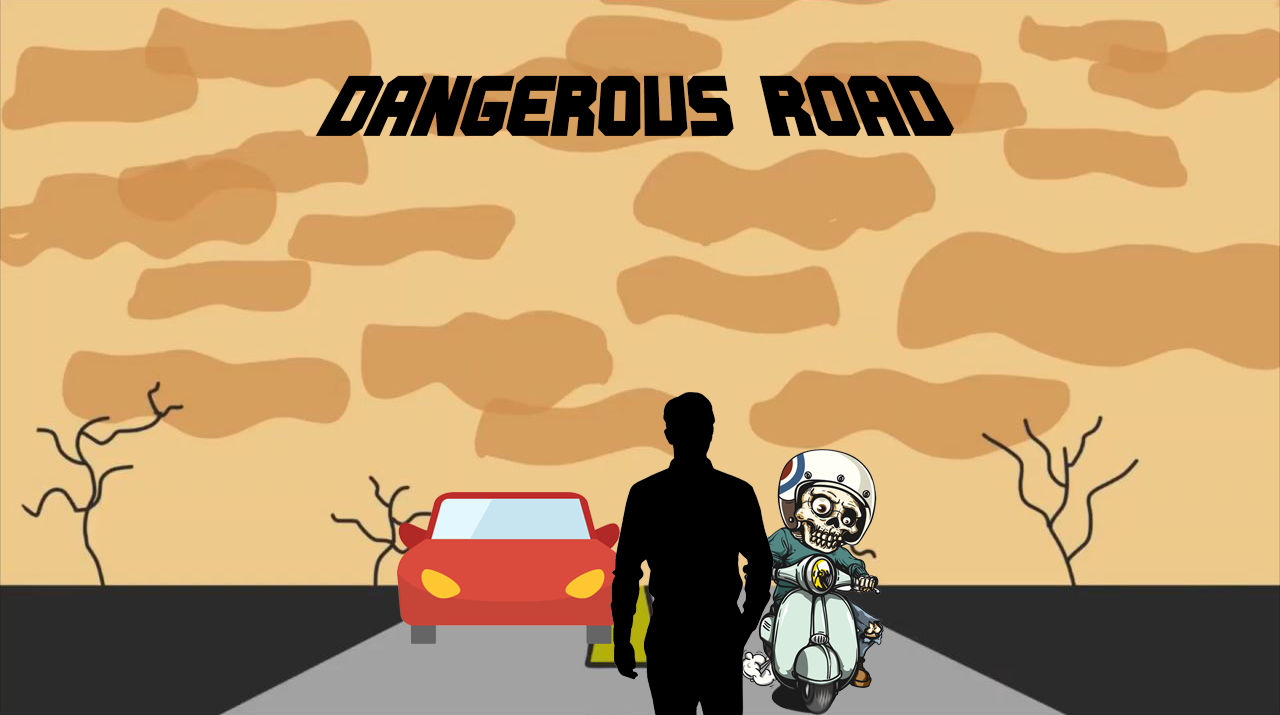
<style>
.page{position:relative;width:1280px;height:715px;background:#edc98b}
.page>*{position:absolute;margin:0}
.t1{font:82.8px "BNMachine";color:#000000}
</style>
<div class="page">
<p class="t1" style="left:315px;top:75px;width:639px;height:61px">DANGEROUS ROAD</p>
</div>
